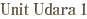
<style>
.page{position:relative;width:87px;height:19px;background:#ffffff}
.page>*{position:absolute;margin:0}
.t1{font:15.5px "RyuminPro-ExBold";letter-spacing:-0.04em}
</style>
<div class="page">
<p class="t1" style="left:0px;top:3px;width:87px;height:12px">Unit Udara 1</p>
</div>
